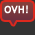
<style>
.page{position:relative;width:35px;height:35px;background:#333333}
.page>*{position:absolute;margin:0}
.t1{font:10px "TrebuchetMS-Bold";color:#ffffff;font-weight:bold}
</style>
<div class="page">
<p class="t1" style="left:4px;top:5px;width:24px;height:9px">OVH!</p>
</div>
